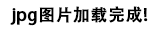
<style>
.page{position:relative;width:160px;height:30px;background:#ffffff}
.page>*{position:absolute;margin:0}
.t1{font:17px "AdobeHeitiStd-Regular";color:#000000;font-weight:bold}
</style>
<div class="page">
<p class="t1" style="left:10px;top:6px;width:138px;height:20px">jpg图片加载完成!</p>
</div>
